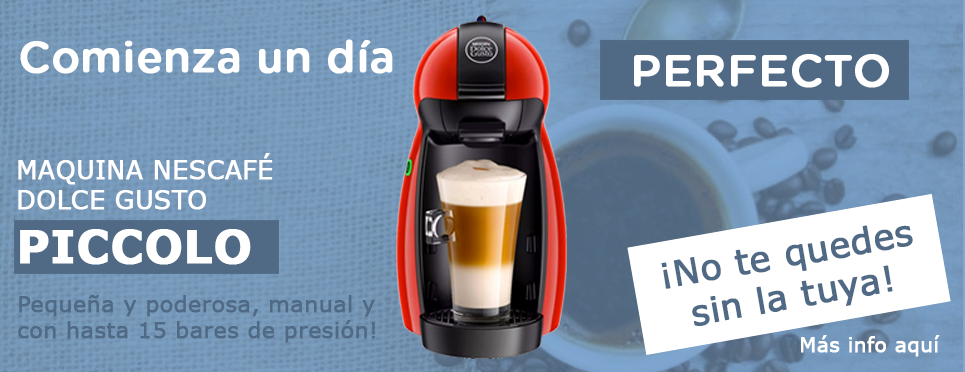
<style>
.page{position:relative;width:965px;height:372px}
.page>*{position:absolute;margin:0}
.t1{font:43px "GothamRounded-Medium";color:#ffffff;font-weight:bold}
.t2{font:45px "GothamRounded-Medium";color:#ffffff;font-weight:bold}
.t3{font:25px "Verdana";color:#ffffff;font-weight:bold}
.t4{font:45px "Verdana-Bold";color:#ffffff;font-weight:bold}
.t5{font:35px "Verdana";color:#506a85;font-weight:bold}
.t6{font:22px "Verdana";color:#506a85;font-weight:bold}
.t7{font:20px "Verdana";color:#ffffff;font-weight:bold}
</style>
<div class="page">
<p class="t1" style="left:20px;top:39px;width:373px;height:35px">Comienza un día</p>
<p class="t2" style="left:634px;top:54px;width:255px;height:34px">PERFECTO</p>
<p class="t3" style="left:18px;top:153px;width:255px;height:112px">MAQUINA NESCAFÉ<br>DOLCE GUSTO <br><span class="t4">PICCOLO</span></p>
<p class="t5" style="left:661px;top:225px;width:252px;height:101px;rotate:-10deg">¡No te quedes sin la tuya!</p>
<p class="t6" style="left:18px;top:295px;width:357px;height:48px">Pequeña y poderosa, manual y con hasta 15 bares de presión!</p>
<p class="t7" style="left:801px;top:335px;width:139px;height:22px">Más info aquí</p>
</div>
